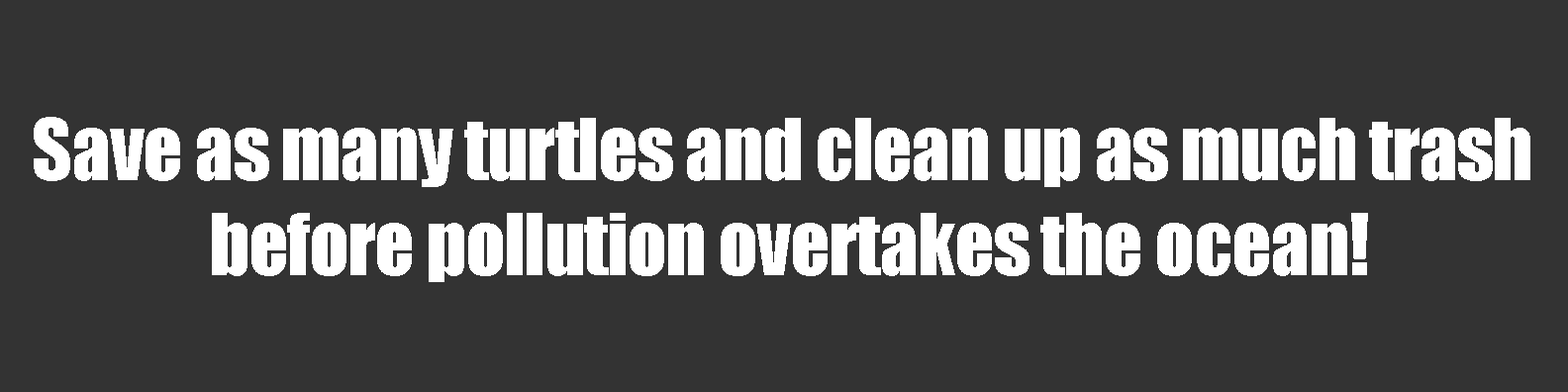
<style>
.page{position:relative;width:1568px;height:392px;background:#333333}
.page>*{position:absolute;margin:0}
.t1{font:79.2px "Impact";letter-spacing:-0.02em;color:#ffffff}
</style>
<div class="page">
<p class="t1" style="left:34px;top:117px;width:1496px;height:165px;text-align:center">Save as many turtles and clean up as much trash <br>before pollution overtakes the ocean!</p>
</div>
